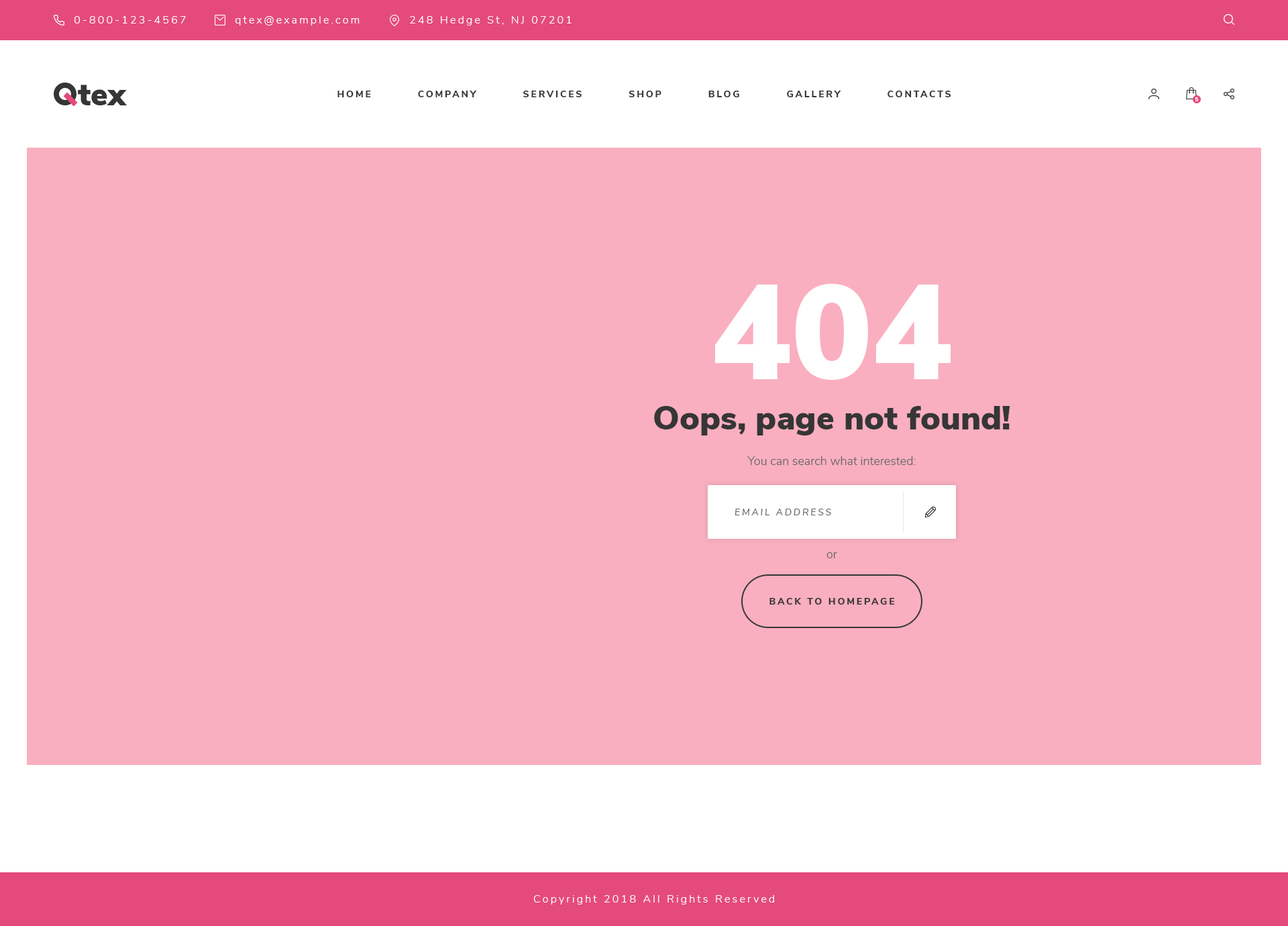
<style>
.page{position:relative;width:1288px;height:926px;background:#f9afbf}
.page>*{position:absolute;margin:0}
.t1{font:10.7px "NunitoSans-Light";letter-spacing:0.2em;color:#ffffff}
.t2{font:9.4px "NunitoSans-ExtraBold";letter-spacing:0.2em;color:#363636;text-transform:uppercase}
.t3{font:5.4px "NunitoSans-Black";color:#ffffff;text-transform:uppercase}
.t4{font:134.2px "NunitoSans-Black";color:#ffffff;text-transform:uppercase}
.t5{font:33.5px "NunitoSans-Black";color:#363636}
.t6{font:12.1px "NunitoSans-Light";color:#666666}
.t7{font:9.4px "NunitoSans-Italic";letter-spacing:0.2em;color:#666666;text-transform:uppercase}
</style>
<div class="page">
<p class="t1" style="left:74px;top:16px;width:112px;height:7px">0-800-123-4567</p>
<p class="t1" style="left:235px;top:16px;width:125px;height:9px">qtex@example.com</p>
<p class="t1" style="left:410px;top:16px;width:162px;height:9px">248 Hedge St, NJ 07201</p>
<p class="t2" style="left:337px;top:91px;width:614px;height:6px">Home          Company          Services          Shop          Blog          Gallery          Contacts</p>
<p class="t3" style="left:1195px;top:97px;width:4px;height:4px">5</p>
<p class="t4" style="left:715px;top:284px;width:236px;height:96px">404</p>
<p class="t5" style="left:654px;top:406px;width:356px;height:29px">Oops, page not found!</p>
<p class="t6" style="left:747px;top:456px;width:169px;height:9px">You can search what interested:</p>
<p class="t7" style="left:735px;top:509px;width:96px;height:6px">Email Address</p>
<p class="t6" style="left:826px;top:552px;width:11px;height:6px">or</p>
<p class="t2" style="left:769px;top:598px;width:126px;height:6px">back to homepage</p>
<p class="t1" style="left:533px;top:895px;width:241px;height:9px">Copyright 2018 All Rights Reserved</p>
</div>
